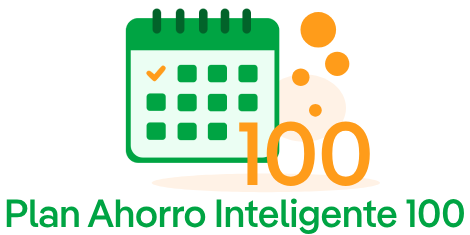
<style>
.page{position:relative;width:470px;height:235px;background:#ffffff}
.page>*{position:absolute;margin:0}
.t1{font:89.3px "IberPangea-Medium";color:#ff9c1a}
.t2{font:39.3px "IberPangea-Medium";color:#00a443}
</style>
<div class="page">
<p class="t1" style="left:239px;top:121px;width:131px;height:65px">100</p>
<p class="t2" style="left:6px;top:198px;width:458px;height:37px">Plan Ahorro Inteligente 100</p>
</div>
